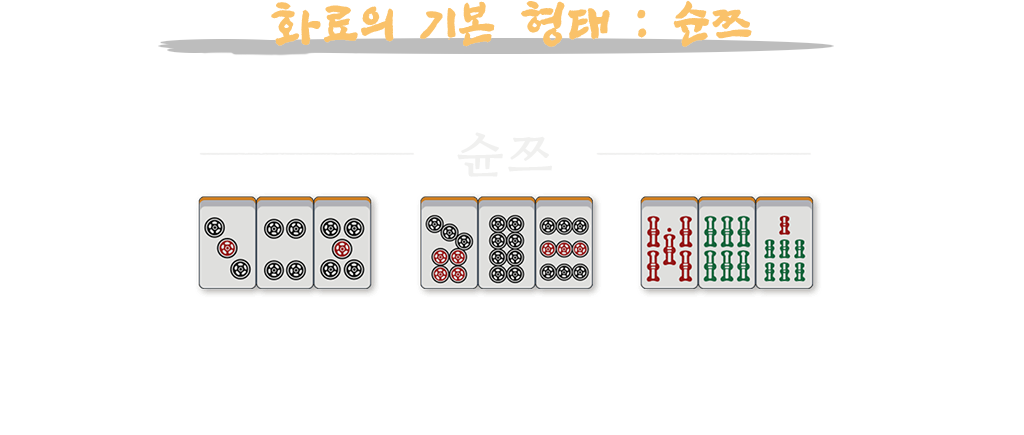
<style>
.page{position:relative;width:1024px;height:435px;background:#ffffff}
.page>*{position:absolute;margin:0}
.t1{font:48px "SangSangRockOTF";letter-spacing:0.06em;color:#fac26a;font-weight:bold}
.t2{font:48px "NanumMyeongjo";letter-spacing:0.06em;color:#f0f0ef;font-weight:bold}
</style>
<div class="page">
<p class="t1" style="left:271px;top:0px;width:481px;height:47px">화료의 기본 형태 : 슌쯔</p>
<p class="t2" style="left:457px;top:132px;width:95px;height:45px">슌쯔</p>
</div>
